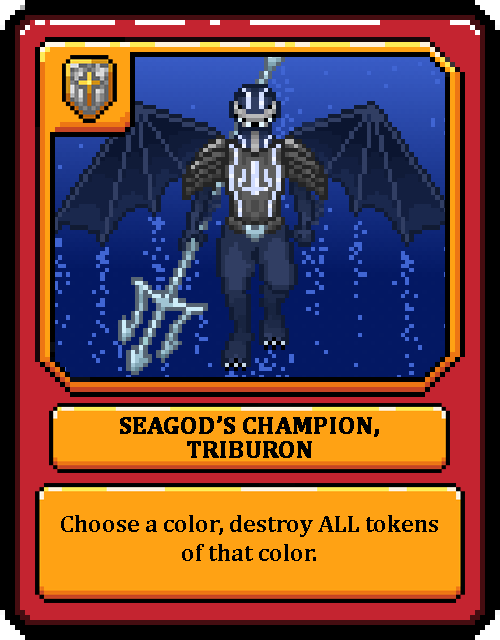
<style>
.page{position:relative;width:500px;height:640px}
.page>*{position:absolute;margin:0}
.t1{font:24px/24px "Cambria-Bold";color:#000000;text-transform:uppercase;font-weight:bold}
.t2{font:24px "Cambria-Bold";color:#000000}
</style>
<div class="page">
<p class="t1" style="left:120px;top:416px;width:259px;height:42px;text-align:center">Seagod’s Champion, Triburon</p>
<p class="t2" style="left:61px;top:515px;width:377px;height:46px;text-align:center">Choose a color, destroy ALL tokens of that color.</p>
</div>
